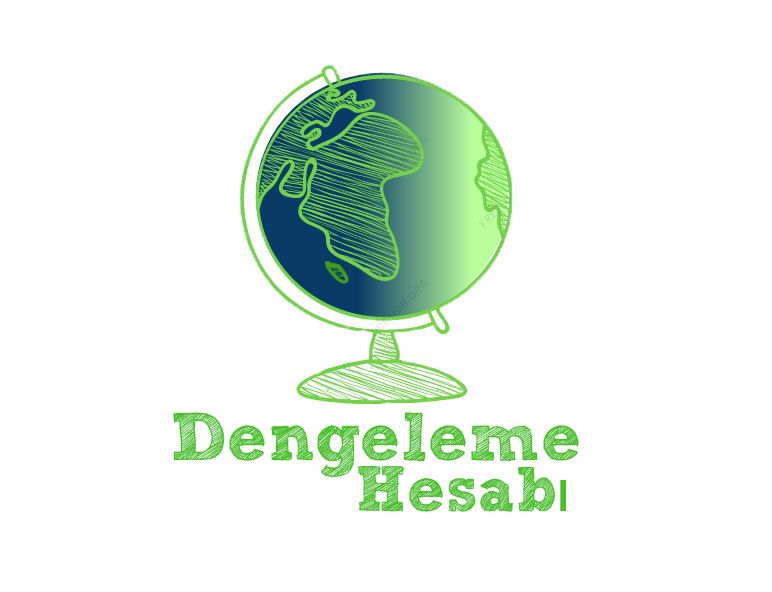
<style>
.page{position:relative;width:772px;height:592px;background:#ffffff}
.page>*{position:absolute;margin:0}
.t1{font:67.6px "SketchRockwell";letter-spacing:0.003em;color:#47c023}
.t2{font:64px "SketchRockwell";letter-spacing:0.003em;color:#47c023}
.t3{font:64px "MyriadPro-Regular";letter-spacing:0.003em;color:#47c023}
</style>
<div class="page">
<p class="t1" style="left:173px;top:412px;width:407px;height:66px">Dengeleme</p>
<p class="t2" style="left:357px;top:465px;width:209px;height:47px">Hesab<span class="t3">ı</span></p>
</div>
